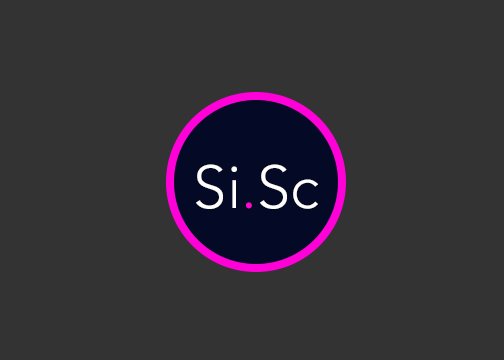
<style>
.page{position:relative;width:504px;height:360px;background:#333333}
.page>*{position:absolute;margin:0}
.t1{font:60px "Avenir-Light";color:#fefefe}
.t2{font:60px "Avenir-Light";color:#ff07d3}
.t3{font:60px "Avenir-Light";color:#ffffff}
</style>
<div class="page">
<p class="t1" style="left:196px;top:164px;width:122px;height:45px">Si<span class="t2">.</span><span class="t3">Sc</span></p>
</div>
